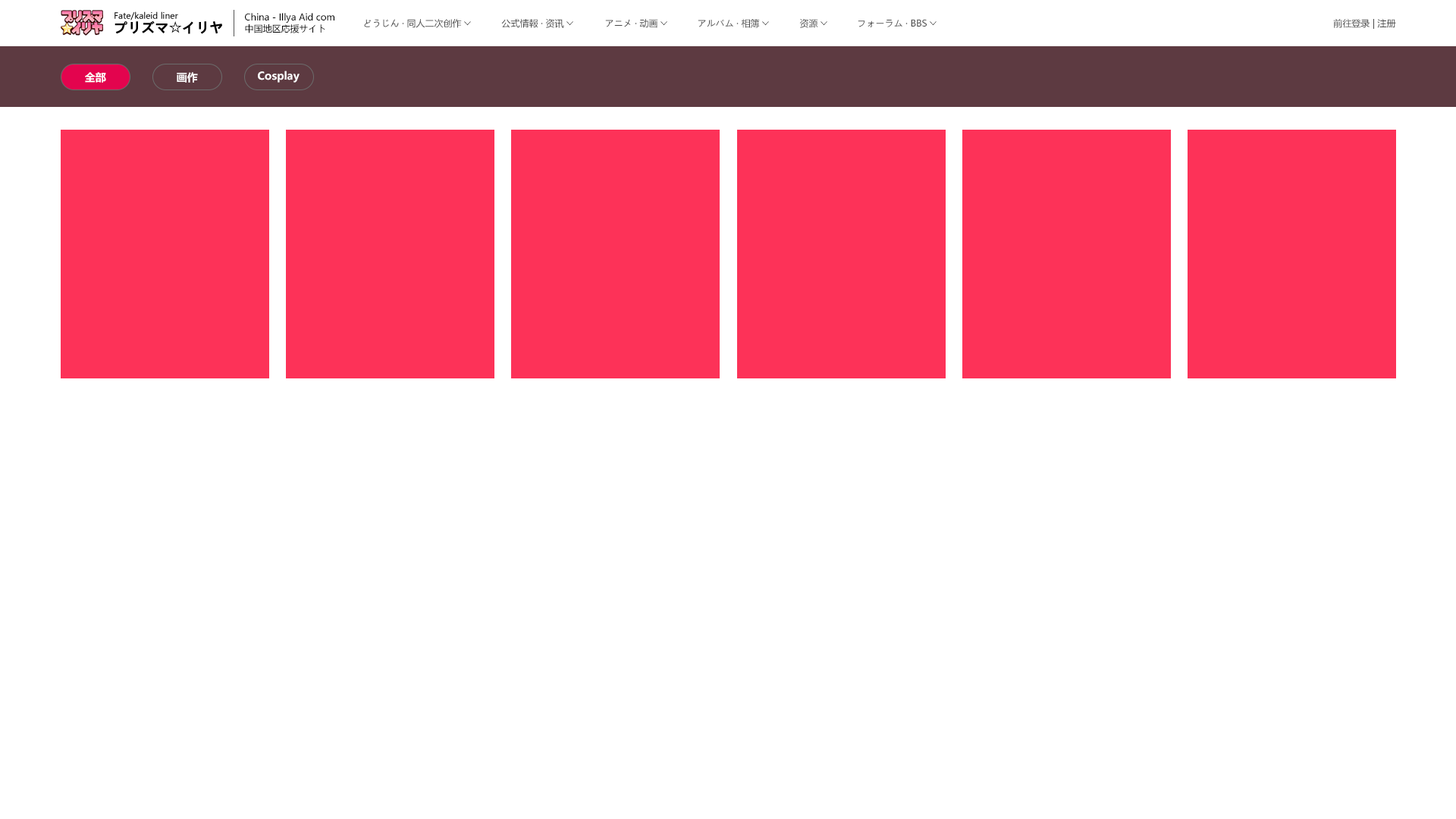
<style>
.page{position:relative;width:1456px;height:819px;background:#ffffff}
.page>*{position:absolute;margin:0}
.t1{font:8.3px "MicrosoftYaHeiUI";color:#000000}
.t2{font:9.1px "MicrosoftYaHeiUI";color:#000000}
.t3{font:13.6px "MicrosoftYaHeiUI-Bold";color:#000000}
.t4{font:13.6px "AdobeHeitiStd-Regular";color:#000000}
.t5{font:9.1px "MicrosoftYaHeiUI";color:#484848}
.t6{font:9.1px "MS-PGothic"}
.t7{font:10.6px "MicrosoftYaHeiUI-Bold";color:#ffffff}
</style>
<div class="page">
<p class="t1" style="left:115px;top:11px;width:63px;height:9px">Fate/kaleid liner</p>
<p class="t2" style="left:245px;top:13px;width:89px;height:10px">China - Illya Aid com</p>
<p class="t3" style="left:115px;top:20px;width:107px;height:14px">プリズマ<span class="t4">☆</span>イリヤ</p>
<p class="t2" style="left:245px;top:24px;width:80px;height:9px">中国地区応援サイト</p>
<p class="t5" style="left:364px;top:19px;width:98px;height:9px">どうじん · 同人二次创作</p>
<p class="t6" style="left:464px;top:21px;width:7px;height:5px;rotate:90deg">&gt;</p>
<p class="t5" style="left:501px;top:18px;width:63px;height:10px">公式情報 · 资讯</p>
<p class="t6" style="left:566px;top:21px;width:7px;height:5px;rotate:90deg">&gt;</p>
<p class="t5" style="left:605px;top:19px;width:53px;height:9px">アニメ · 动画</p>
<p class="t6" style="left:660px;top:21px;width:7px;height:5px;rotate:90deg">&gt;</p>
<p class="t5" style="left:698px;top:19px;width:62px;height:9px">アルバム · 相簿</p>
<p class="t6" style="left:762px;top:21px;width:7px;height:5px;rotate:90deg">&gt;</p>
<p class="t5" style="left:799px;top:18px;width:19px;height:10px">资源</p>
<p class="t6" style="left:821px;top:21px;width:6px;height:5px;rotate:90deg">&gt;</p>
<p class="t5" style="left:858px;top:19px;width:69px;height:8px">フォーラム · BBS</p>
<p class="t6" style="left:930px;top:21px;width:7px;height:5px;rotate:90deg">&gt;</p>
<p class="t5" style="left:1333px;top:19px;width:63px;height:10px">前往登录 | 注册</p>
<p class="t7" style="left:85px;top:72px;width:21px;height:11px">全部</p>
<p class="t7" style="left:177px;top:72px;width:21px;height:11px">画作</p>
<p class="t7" style="left:258px;top:71px;width:42px;height:12px">Cosplay</p>
</div>
